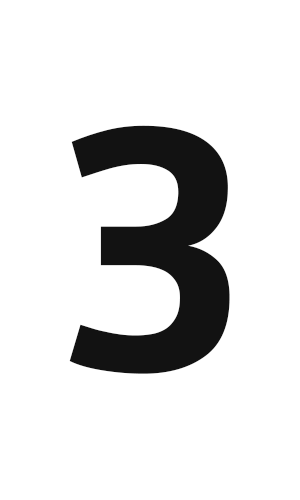
<style>
.page{position:relative;width:300px;height:500px;background:#ffffff}
.page>*{position:absolute;margin:0}
.t1{font:335px "GyeonggiTitleV";color:#121212}
</style>
<div class="page">
<p class="t1" style="left:69px;top:125px;width:161px;height:249px">3</p>
</div>
